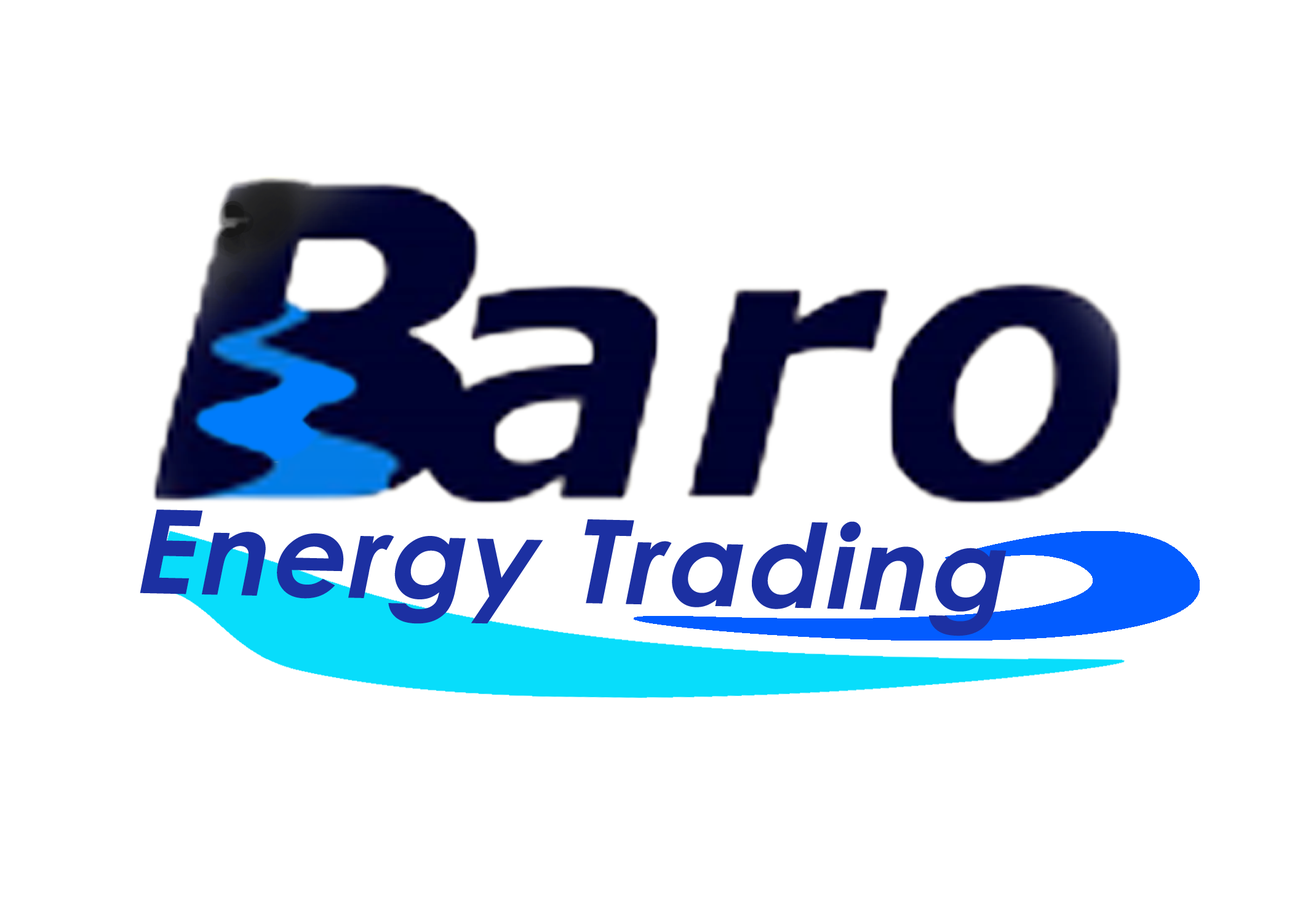
<style>
.page{position:relative;width:1292px;height:923px;background:#ffffff}
.page>*{position:absolute;margin:0}
.t1{font:116.4px "CenturyGothic-Bold";letter-spacing:0.025em;color:#1c30a2;font-style:italic}
</style>
<div class="page">
<p class="t1" style="left:140px;top:509px;width:867px;height:127px;rotate:1deg">Energy Trading</p>
</div>
